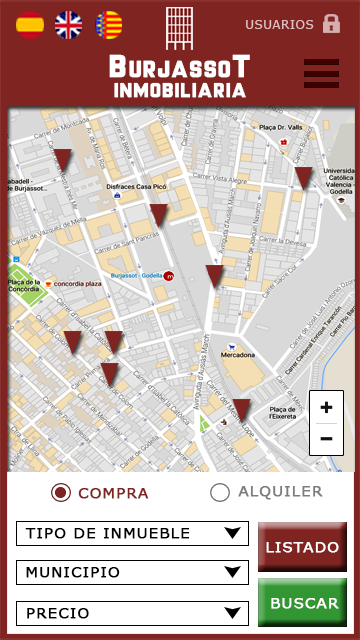
<style>
.page{position:relative;width:360px;height:640px;background:#ffffff}
.page>*{position:absolute;margin:0}
.t1{font:11.6px "MSReferenceSansSerif";letter-spacing:0.07em;color:#e0c0c0}
.t2{font:21.7px "MrHeadlines";letter-spacing:0.07em;color:#ffffff;scale:1.11 1}
.t3{font:29.6px "MrHeadlines";letter-spacing:0.07em;color:#ffffff;scale:1.11 1}
.t4{font:18.8px "MrHeadlines";letter-spacing:0.07em;color:#ffffff;scale:1.11 1}
.t5{font:14px "MSReferenceSansSerif";letter-spacing:0.07em;color:#7d7d7d;font-weight:bold;scale:1.04 1}
.t6{font:14px "MSReferenceSansSerif";letter-spacing:0.07em;color:#7f2421;font-weight:bold;scale:1.04 1}
.t7{font:14px "MSReferenceSansSerif";letter-spacing:0.07em;color:#000000;font-weight:bold;scale:1.04 1}
.t8{font:14px "MSReferenceSansSerif";letter-spacing:0.07em;color:#ffffff;font-weight:bold;scale:1.04 1}
</style>
<div class="page">
<p class="t1" style="left:246px;top:20px;width:68px;height:9px">USUARIOS</p>
<p class="t2" style="left:109px;top:54px;width:141px;height:24px"><span class="t3">B</span>URJASSO<span class="t3">T</span></p>
<p class="t4" style="left:114px;top:82px;width:132px;height:16px">INMOBILIARIA</p>
<p class="t5" style="left:238px;top:486px;width:85px;height:14px">ALQUILER</p>
<p class="t6" style="left:78px;top:488px;width:71px;height:11px">COMPRA</p>
<p class="t7" style="left:25px;top:528px;width:165px;height:11px">TIPO DE INMUEBLE</p>
<p class="t8" style="left:266px;top:542px;width:73px;height:11px">LISTADO</p>
<p class="t7" style="left:26px;top:567px;width:94px;height:11px">MUNICIPIO</p>
<p class="t8" style="left:271px;top:598px;width:68px;height:11px">BUSCAR</p>
<p class="t7" style="left:27px;top:608px;width:62px;height:11px">PRECIO</p>
</div>
